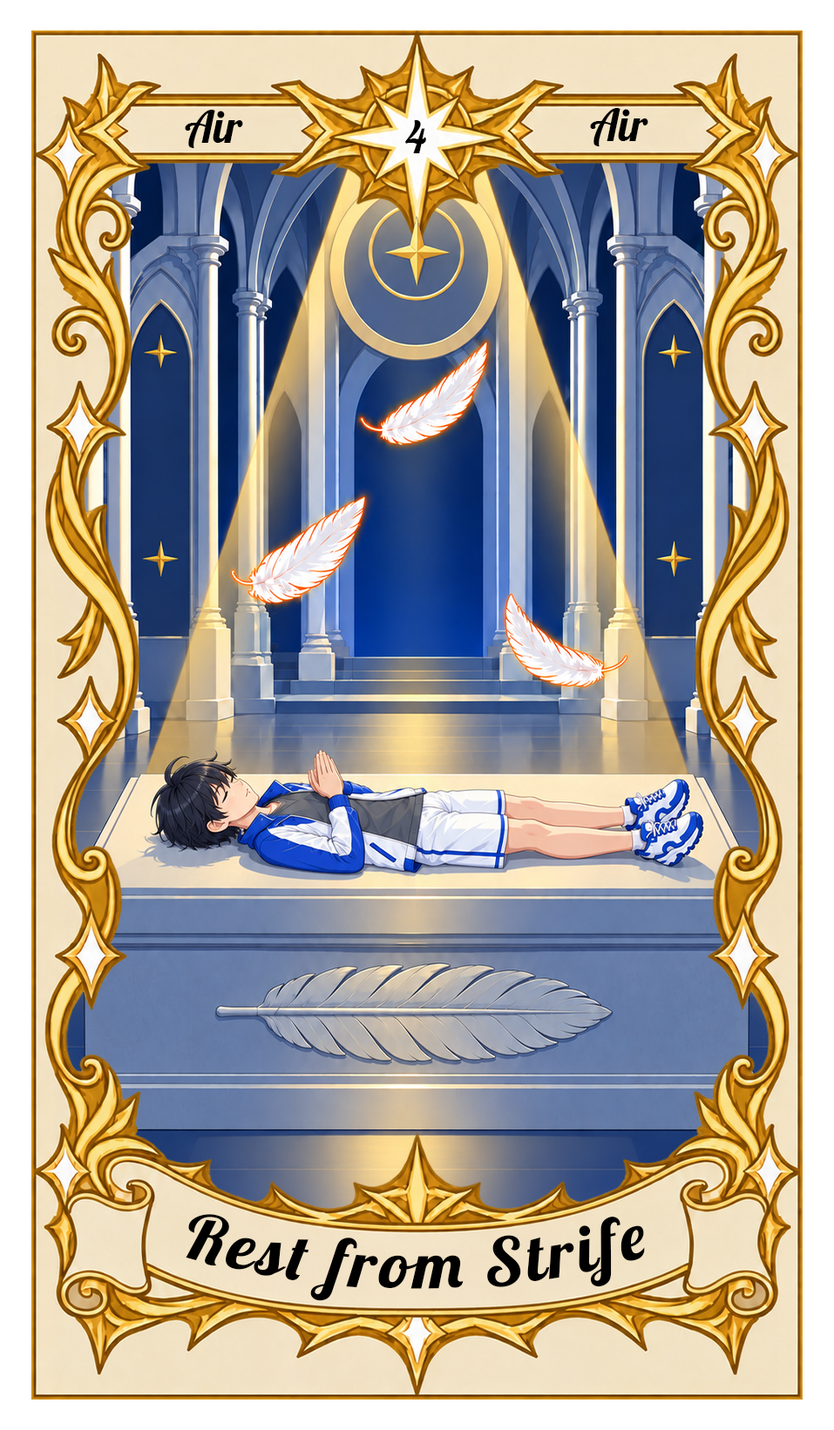
<style>
.page{position:relative;width:834px;height:1430px}
.page>*{position:absolute;margin:0}
.t1{font:43.6px "Lobster-Regular";color:#000000}
.t2{font:65.3px "Lobster-Regular";letter-spacing:0.05em;color:#000000}
</style>
<div class="page">
<p class="t1" style="left:185px;top:110px;width:58px;height:38px">Air</p>
<p class="t1" style="left:590px;top:108px;width:58px;height:38px">Air</p>
<p class="t1" style="left:404px;top:120px;width:22px;height:33px">4</p>
<p class="t2" style="left:186px;top:1214px;width:459px;height:87px">Rest from Strife</p>
</div>
